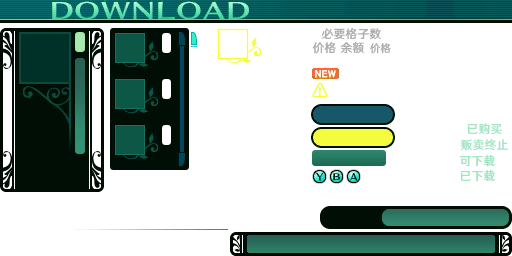
<style>
.page{position:relative;width:512px;height:256px;background:#ffffff}
.page>*{position:absolute;margin:0}
.t1{font:12px "HYWenHei-FEW";letter-spacing:0.025em;color:#abadad;scale:0.97 1}
.t2{font:10.7px "HYWenHei-FEW";letter-spacing:0.025em;color:#abadad;scale:0.97 1}
.t3{font:12px "HYWenHei-FEW";letter-spacing:0.025em;color:#a1e5c3;scale:0.97 1}
</style>
<div class="page">
<p class="t1" style="left:321px;top:28px;width:60px;height:12px">必要格子数</p>
<p class="t1" style="left:312px;top:42px;width:24px;height:12px">价格</p>
<p class="t1" style="left:340px;top:42px;width:24px;height:11px">余额</p>
<p class="t2" style="left:370px;top:43px;width:21px;height:11px">价格</p>
<p class="t3" style="left:467px;top:123px;width:35px;height:12px">已购买</p>
<p class="t3" style="left:461px;top:139px;width:47px;height:12px">贩卖终止</p>
<p class="t3" style="left:460px;top:155px;width:35px;height:12px">可下载</p>
<p class="t3" style="left:460px;top:170px;width:35px;height:12px">已下载</p>
</div>
